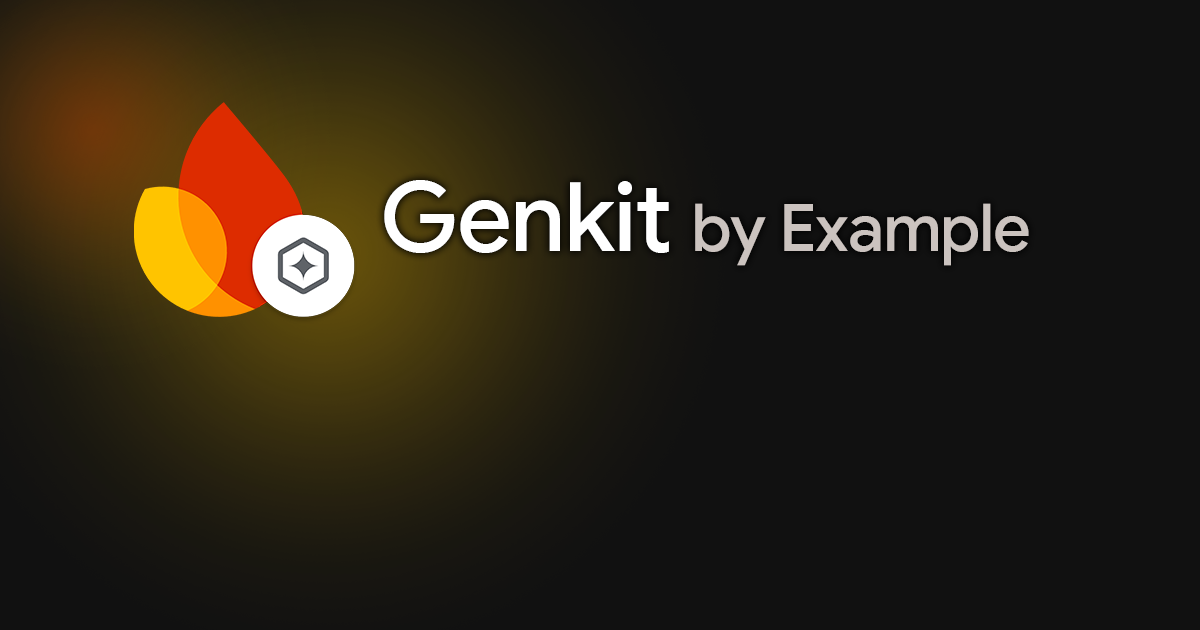
<style>
.page{position:relative;width:1200px;height:630px;background:#111111}
.page>*{position:absolute;margin:0}
.t1{font:66px "GoogleSans-Medium";letter-spacing:-0.02em;color:#cbc3bf}
.t2{font:95.9px "GoogleSans-Medium";letter-spacing:-0.02em;color:#ffffff}
</style>
<div class="page">
<p class="t1" style="left:384px;top:180px;width:645px;height:86px"><span class="t2">Genkit </span>by Example</p>
</div>
